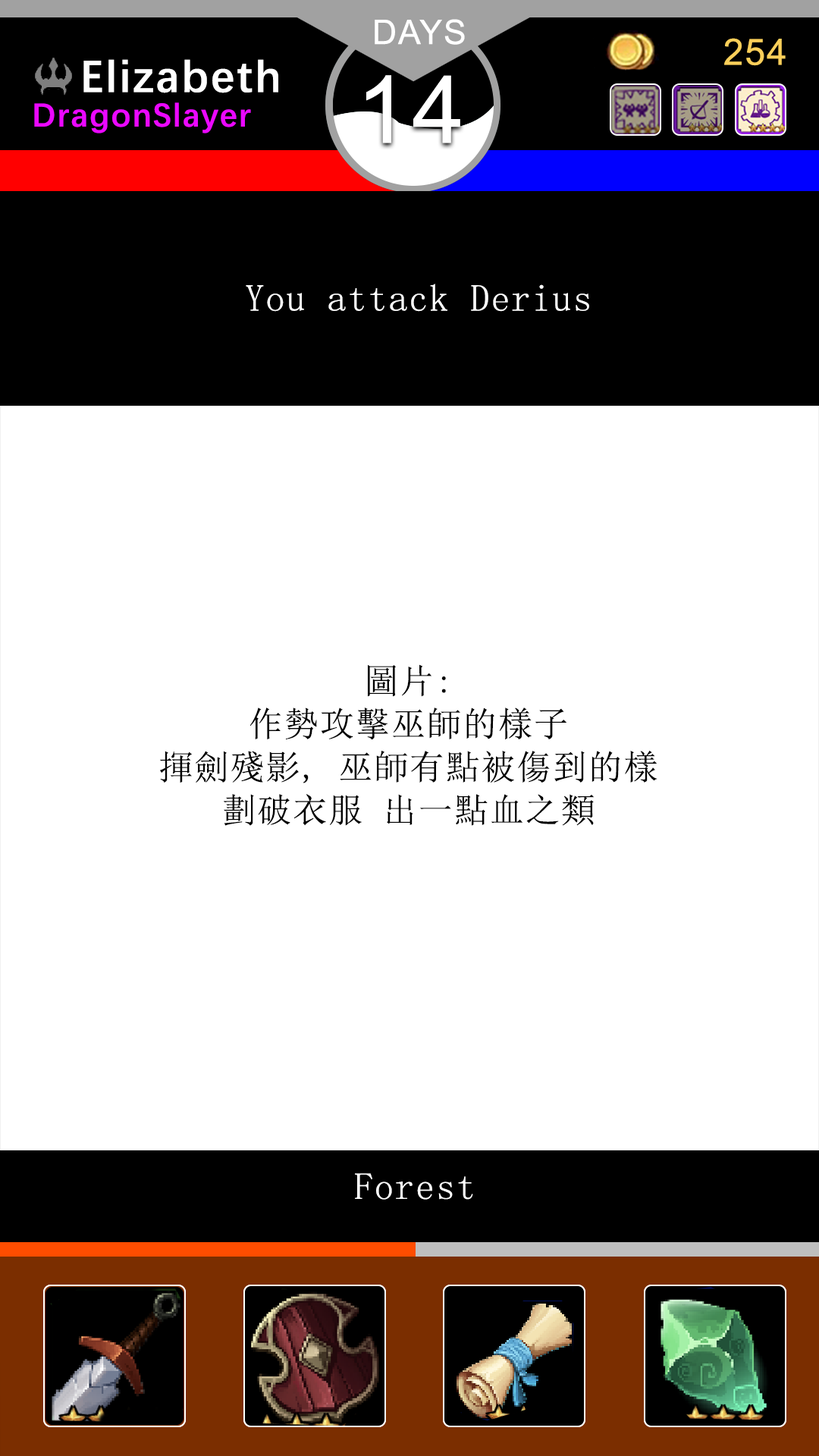
<style>
.page{position:relative;width:819px;height:1456px;background:#ffffff}
.page>*{position:absolute;margin:0}
.t1{font:37.9px "SimSun";letter-spacing:0.04em;color:#ffffff}
.t2{font:34.3px/43.1px "SimSun";letter-spacing:0.04em;color:#000000}
</style>
<div class="page">
<p class="t1" style="left:246px;top:284px;width:343px;height:28px">You attack Derius</p>
<p class="t2" style="left:160px;top:664px;width:497px;height:162px;text-align:center">圖片:<br>作勢攻擊巫師的樣子<br>揮劍殘影, 巫師有點被傷到的樣<br>劃破衣服 出一點血之類</p>
<p class="t1" style="left:355px;top:1173px;width:118px;height:27px">Forest</p>
</div>
